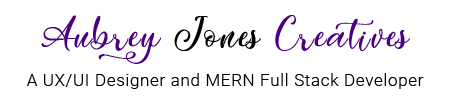
<style>
.page{position:relative;width:450px;height:100px;background:#ffffff}
.page>*{position:absolute;margin:0}
.t1{font:41.7px "Easy-November";letter-spacing:0.05em;color:#4b0082}
.t2{font:41.7px "Easy-November";letter-spacing:0.05em;color:#000000}
.t3{font:16.7px "Roboto-Light";letter-spacing:0.05em;color:#000000}
</style>
<div class="page">
<p class="t1" style="left:41px;top:15px;width:369px;height:49px">Aubrey <span class="t2">Jones </span>Creatives</p>
<p class="t3" style="left:26px;top:73px;width:398px;height:16px">A UX/UI Designer and MERN Full Stack Developer</p>
</div>
